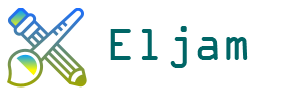
<style>
.page{position:relative;width:300px;height:96px;background:#ffffff}
.page>*{position:absolute;margin:0}
.t1{font:48px "OCRAExtended";color:#006666}
</style>
<div class="page">
<p class="t1" style="left:110px;top:26px;width:138px;height:42px">Eljam</p>
</div>
